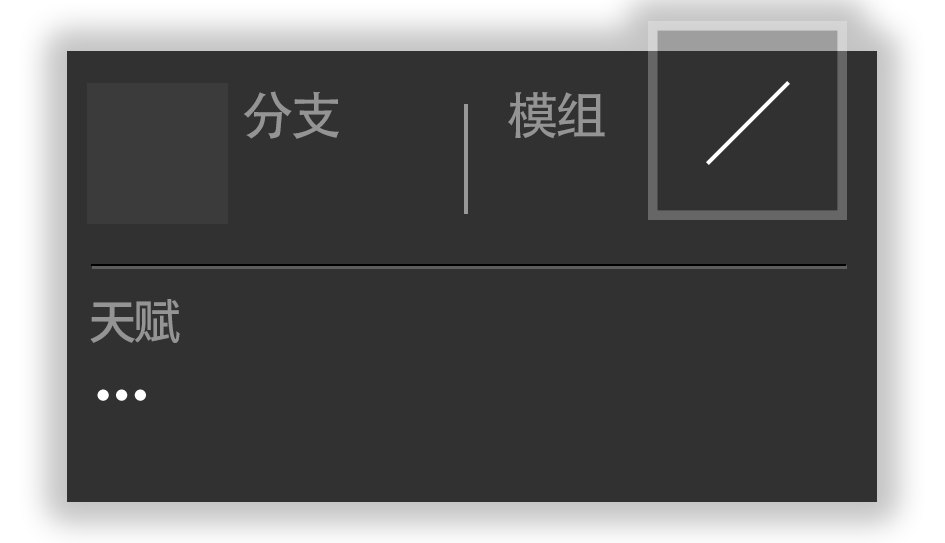
<style>
.page{position:relative;width:945px;height:543px;background:#313131}
.page>*{position:absolute;margin:0}
.t1{font:52px "AdobeHeitiStd-Regular";letter-spacing:-0.07em;color:#949494}
.t2{font:48px "SourceHanSansCN-Medium";letter-spacing:-0.07em;color:#949494}
</style>
<div class="page">
<p class="t1" style="left:243px;top:91px;width:96px;height:48px">分支</p>
<p class="t1" style="left:508px;top:92px;width:97px;height:47px">模组</p>
<p class="t2" style="left:90px;top:299px;width:90px;height:44px">天赋</p>
</div>
